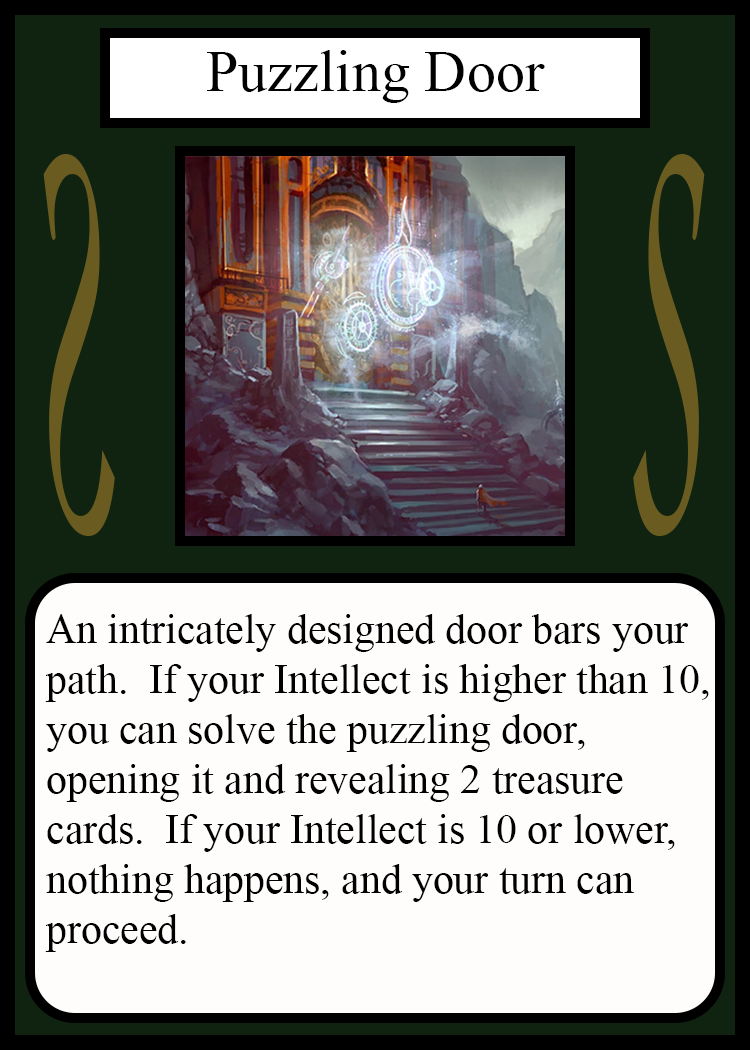
<style>
.page{position:relative;width:750px;height:1050px;background:#fffcfc}
.page>*{position:absolute;margin:0}
.t1{font:58.3px "TimesNewRomanPSMT";color:#010101}
.t2{font:548.5px "Apple-Chancery";color:#6a5c21;scale:0.27 1}
.t3{font:548.2px "Apple-Chancery";color:#6a5c21;scale:0.27 1}
.t4{font:41.7px "TimesNewRomanPSMT";color:#000000}
</style>
<div class="page">
<p class="t1" style="left:207px;top:50px;width:338px;height:53px">Puzzling Door</p>
<p class="t2" style="left:43px;top:154px;width:72px;height:382px;rotate:180deg">S</p>
<p class="t3" style="left:633px;top:154px;width:72px;height:382px">S</p>
<p class="t4" style="left:45px;top:614px;width:664px;height:338px">An intricately designed door bars your<br>path.  If your Intellect is higher than 10,<br>you can solve the puzzling door,<br>opening it and revealing 2 treasure<br>cards.  If your Intellect is 10 or lower,<br>nothing happens, and your turn can<br>proceed.</p>
</div>
